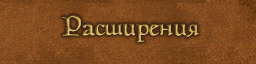
<style>
.page{position:relative;width:256px;height:64px}
.page>*{position:absolute;margin:0}
.t1{font:28px "Magic-Cards-Kollfin-Normal"}
</style>
<div class="page">
<p class="t1" style="left:62px;top:15px;width:137px;height:28px">Расширения</p>
</div>
